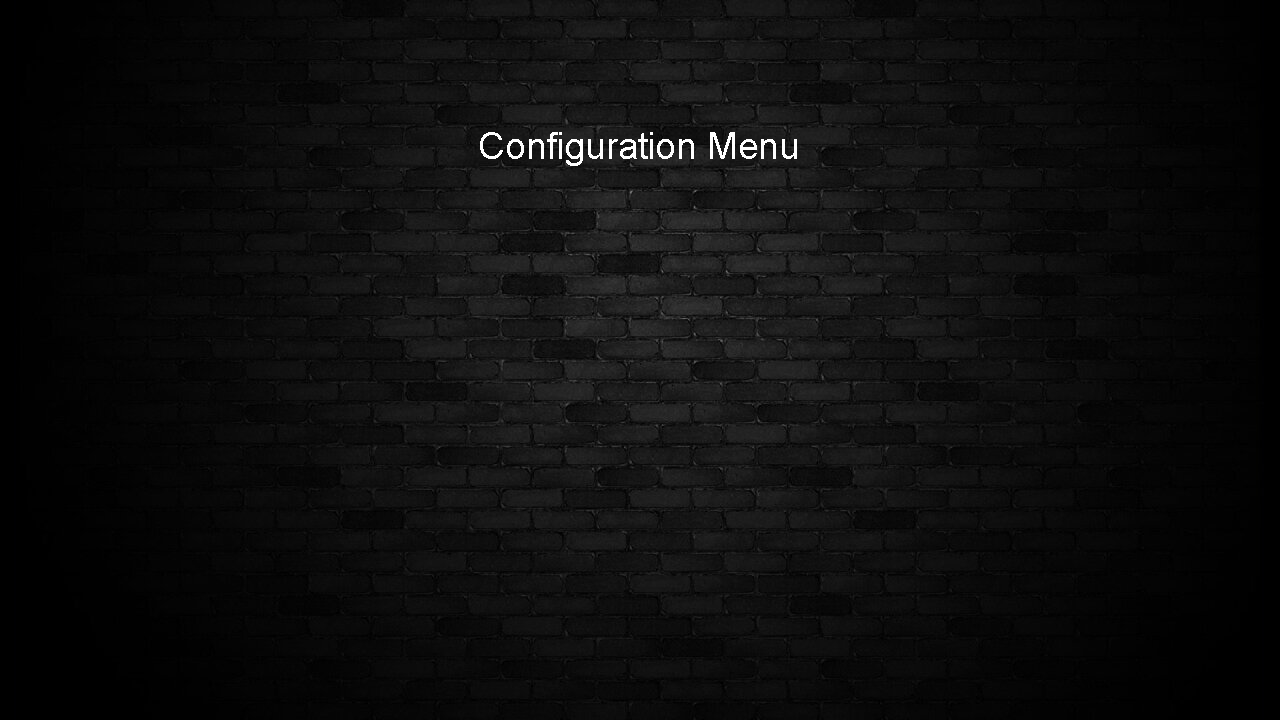
<style>
.page{position:relative;width:1280px;height:720px}
.page>*{position:absolute;margin:0}
.t1{font:37px "ArialMT";color:#ffffff}
</style>
<div class="page">
<p class="t1" style="left:480px;top:132px;width:317px;height:34px">Configuration Menu</p>
</div>
